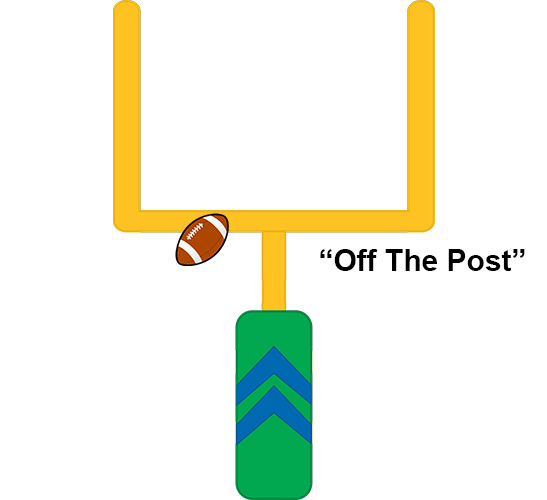
<style>
.page{position:relative;width:547px;height:500px;background:#ffffff}
.page>*{position:absolute;margin:0}
.t1{font:30px "Arial-BoldMT";color:#000000}
</style>
<div class="page">
<p class="t1" style="left:320px;top:249px;width:205px;height:22px">“Off The Post”</p>
</div>
